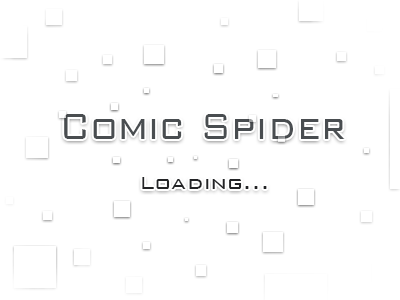
<style>
.page{position:relative;width:400px;height:300px;background:#ffffff}
.page>*{position:absolute;margin:0}
.t1{font:48px "BankGothicBT-Light";color:#494d50;scale:0.85 1}
.t2{font:24px "BankGothicBT-Light";color:#222325}
</style>
<div class="page">
<p class="t1" style="left:64px;top:114px;width:281px;height:25px">Comic Spider</p>
<p class="t2" style="left:142px;top:177px;width:125px;height:12px">Loading...</p>
</div>
